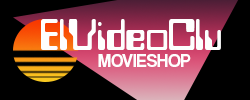
<style>
.page{position:relative;width:250px;height:100px;background:#000000}
.page>*{position:absolute;margin:0}
.t1{font:48px "Westminster";color:#fefefe}
.t2{font:18.7px "CoolveticaRg-Regular";color:#fefefe}
</style>
<div class="page">
<p class="t1" style="left:41px;top:19px;width:180px;height:31px">ElVideoClu</p>
<p class="t2" style="left:98px;top:54px;width:93px;height:13px">MOVIESHOP</p>
</div>
